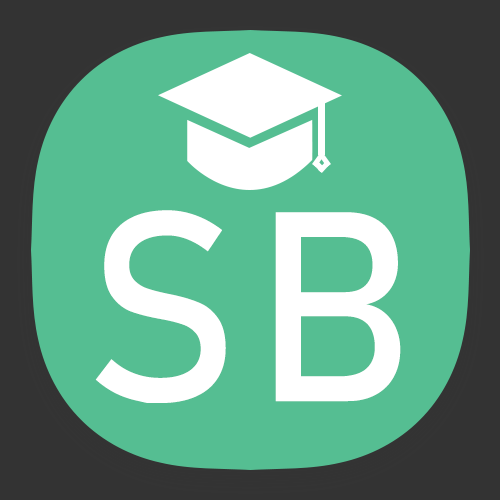
<style>
.page{position:relative;width:500px;height:500px;background:#55be92}
.page>*{position:absolute;margin:0}
.t1{font:265.6px "Bahnschrift";letter-spacing:0.06em;color:#ffffff;scale:0.94 1}
</style>
<div class="page">
<p class="t1" style="left:95px;top:210px;width:306px;height:193px">SB</p>
</div>
